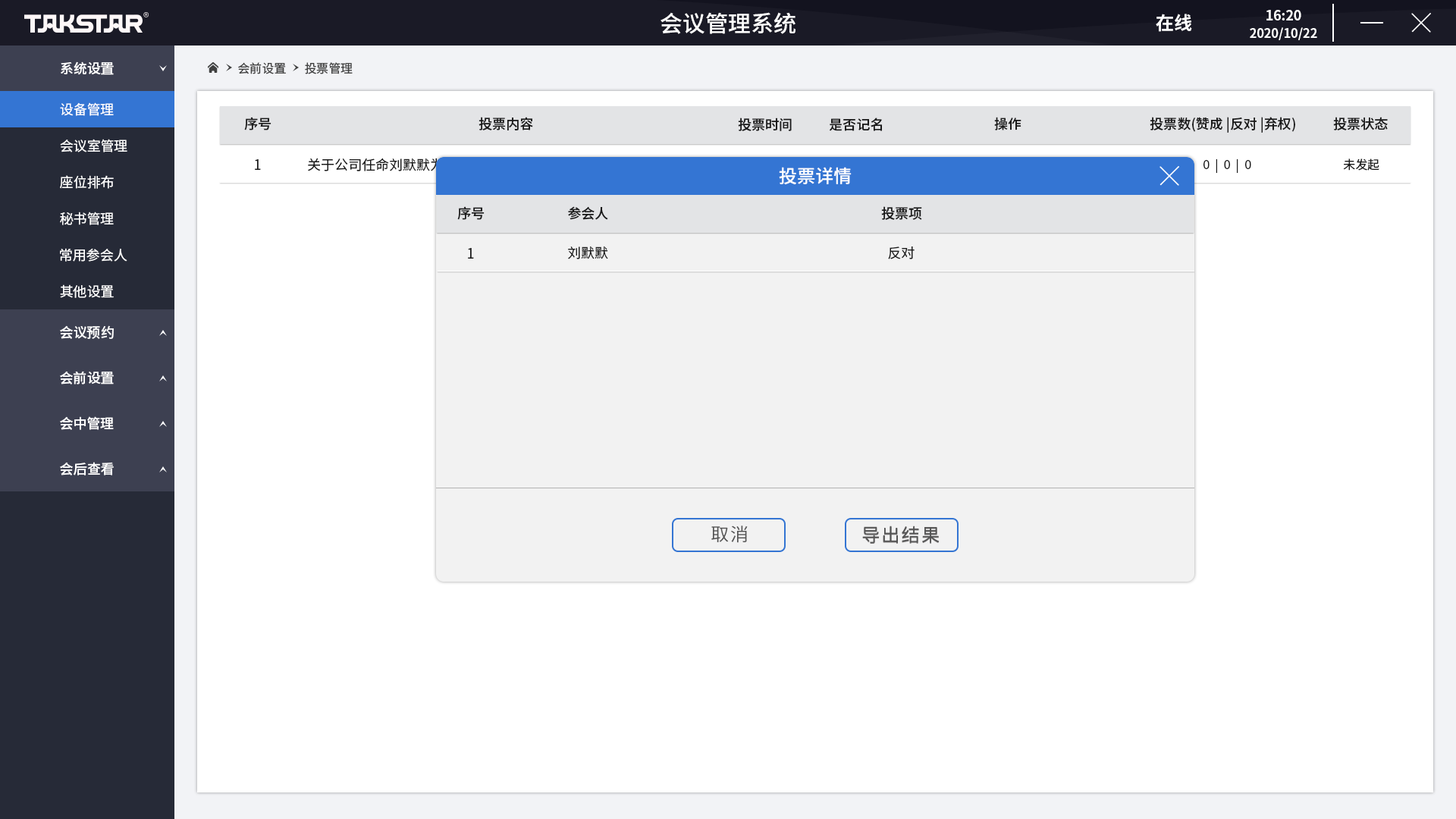
<style>
.page{position:relative;width:1456px;height:819px;background:#ffffff}
.page>*{position:absolute;margin:0}
.t1{font:22.7px "SourceHanSansCN-Medium";color:#ffffff}
.t2{font:18.2px "SourceHanSansCN-Bold";color:#ffffff}
.t3{font:12.6px/17.2px "SourceHanSansCN-Bold";letter-spacing:-0.01em;color:#fefefe}
.t4{font:13.8px/17.2px "SourceHanSansCN-Bold";letter-spacing:-0.01em;color:#fefefe}
.t5{font:13.6px "SourceHanSansCN-Medium";color:#ffffff}
.t6{font:12.1px "SourceHanSansCN-Regular";color:#404040}
.t7{font:13.6px "SourceHanSansCN-Regular";color:#ffffff}
.t8{font:13.6px "SourceHanSansCN-Medium";color:#1a1a1a}
.t9{font:13.6px "SourceHanSansCN-Regular";color:#1a1a1a}
.t10{font:13.6px "SourceHanSansCN-Regular"}
.t11{font:12.1px "SourceHanSansCN-Regular";color:#1a1a1a}
.t12{font:18.2px "SourceHanSansCN-Medium";color:#ffffff}
.t13{font:18.2px "SourceHanSansCN-Regular";letter-spacing:0.075em;color:#535353}
</style>
<div class="page">
<p class="t1" style="left:660px;top:12px;width:135px;height:22px">会议管理系统</p>
<p class="t2" style="left:1156px;top:14px;width:36px;height:18px">在线</p>
<p class="t3" style="left:1250px;top:10px;width:67px;height:30px;text-align:center"><span class="t4">16:20<br></span>2020/10/22</p>
<p class="t5" style="left:61px;top:61px;width:53px;height:14px">系统设置</p>
<p class="t6" style="left:238px;top:62px;width:48px;height:12px">会前设置</p>
<p class="t6" style="left:305px;top:62px;width:48px;height:12px">投票管理</p>
<p class="t7" style="left:60px;top:102px;width:54px;height:14px">设备管理</p>
<p class="t8" style="left:244px;top:117px;width:27px;height:13px">序号</p>
<p class="t8" style="left:479px;top:117px;width:54px;height:13px">投票内容</p>
<p class="t8" style="left:738px;top:118px;width:54px;height:13px">投票时间</p>
<p class="t8" style="left:829px;top:118px;width:53px;height:13px">是否记名</p>
<p class="t8" style="left:994px;top:117px;width:27px;height:13px">操作</p>
<p class="t8" style="left:1150px;top:117px;width:145px;height:16px">投票数(赞成 |反对 |弃权)</p>
<p class="t8" style="left:1333px;top:117px;width:55px;height:13px">投票状态</p>
<p class="t7" style="left:60px;top:139px;width:67px;height:13px">会议室管理</p>
<p class="t9" style="left:255px;top:159px;width:6px;height:11px">1</p>
<p class="t10" style="left:308px;top:158px;width:290px;height:14px">关于公司任命刘默默为公司的xx的任命，请投票！</p>
<p class="t11" style="left:1203px;top:158px;width:48px;height:15px">0  |  0  |  0</p>
<p class="t11" style="left:1343px;top:158px;width:36px;height:13px">未发起</p>
<p class="t12" style="left:779px;top:167px;width:73px;height:18px">投票详情</p>
<p class="t7" style="left:60px;top:175px;width:54px;height:14px">座位排布</p>
<p class="t8" style="left:457px;top:206px;width:28px;height:14px">序号</p>
<p class="t8" style="left:568px;top:206px;width:40px;height:14px">参会人</p>
<p class="t8" style="left:881px;top:206px;width:41px;height:14px">投票项</p>
<p class="t7" style="left:60px;top:212px;width:54px;height:13px">秘书管理</p>
<p class="t9" style="left:568px;top:246px;width:40px;height:13px">刘默默</p>
<p class="t7" style="left:60px;top:248px;width:67px;height:14px">常用参会人</p>
<p class="t9" style="left:468px;top:248px;width:6px;height:11px">1</p>
<p class="t9" style="left:888px;top:246px;width:27px;height:13px">反对</p>
<p class="t7" style="left:60px;top:284px;width:54px;height:14px">其他设置</p>
<p class="t5" style="left:60px;top:325px;width:54px;height:14px">会议预约</p>
<p class="t5" style="left:60px;top:371px;width:54px;height:13px">会前设置</p>
<p class="t5" style="left:60px;top:416px;width:54px;height:14px">会中管理</p>
<p class="t5" style="left:60px;top:462px;width:54px;height:13px">会后查看</p>
<p class="t13" style="left:711px;top:526px;width:37px;height:17px">取消</p>
<p class="t13" style="left:862px;top:526px;width:78px;height:17px">导出结果</p>
</div>
